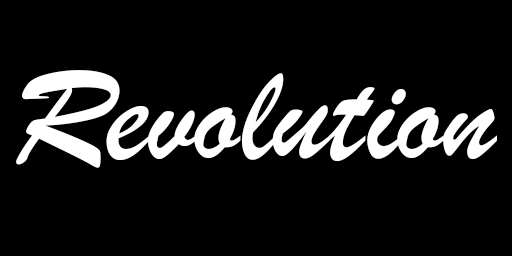
<style>
.page{position:relative;width:512px;height:256px;background:#000000}
.page>*{position:absolute;margin:0}
.t1{font:144px "STXingkai";color:#ffffff}
</style>
<div class="page">
<p class="t1" style="left:16px;top:70px;width:481px;height:98px">Revolution</p>
</div>
